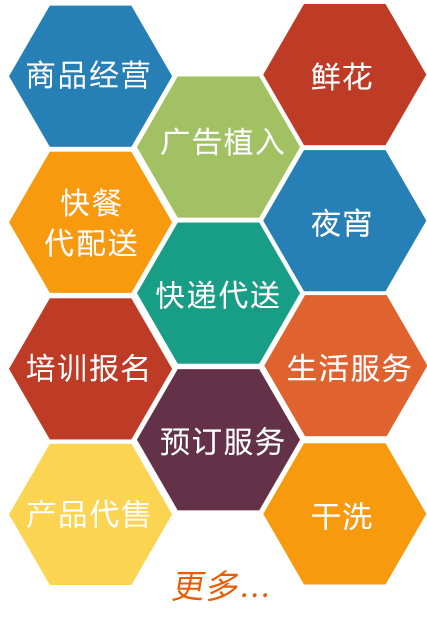
<style>
.page{position:relative;width:427px;height:621px;background:#ffffff}
.page>*{position:absolute;margin:0}
.t1{font:29.3px "MicrosoftYaHei";letter-spacing:0.1em;color:#ffffff}
.t2{font:29.3px/40.6px "MicrosoftYaHei";letter-spacing:0.1em;color:#ffffff}
.t3{font:31.6px "MicrosoftYaHei";letter-spacing:0.1em;color:#eb5c02;font-style:italic}
</style>
<div class="page">
<p class="t1" style="left:27px;top:60px;width:123px;height:29px">商品经营</p>
<p class="t1" style="left:312px;top:62px;width:60px;height:29px">鲜花</p>
<p class="t1" style="left:161px;top:127px;width:123px;height:29px">广告植入</p>
<p class="t2" style="left:45px;top:188px;width:92px;height:69px;text-align:center">快餐<br>代配送</p>
<p class="t1" style="left:312px;top:208px;width:59px;height:29px">夜宵</p>
<p class="t1" style="left:156px;top:280px;width:123px;height:29px">快递代送</p>
<p class="t1" style="left:26px;top:353px;width:121px;height:29px">培训报名</p>
<p class="t1" style="left:288px;top:353px;width:123px;height:30px">生活服务</p>
<p class="t1" style="left:161px;top:426px;width:124px;height:30px">预订服务</p>
<p class="t1" style="left:27px;top:499px;width:123px;height:29px">产品代售</p>
<p class="t1" style="left:312px;top:502px;width:60px;height:29px">干洗</p>
<p class="t3" style="left:172px;top:570px;width:95px;height:32px">更多...</p>
</div>
